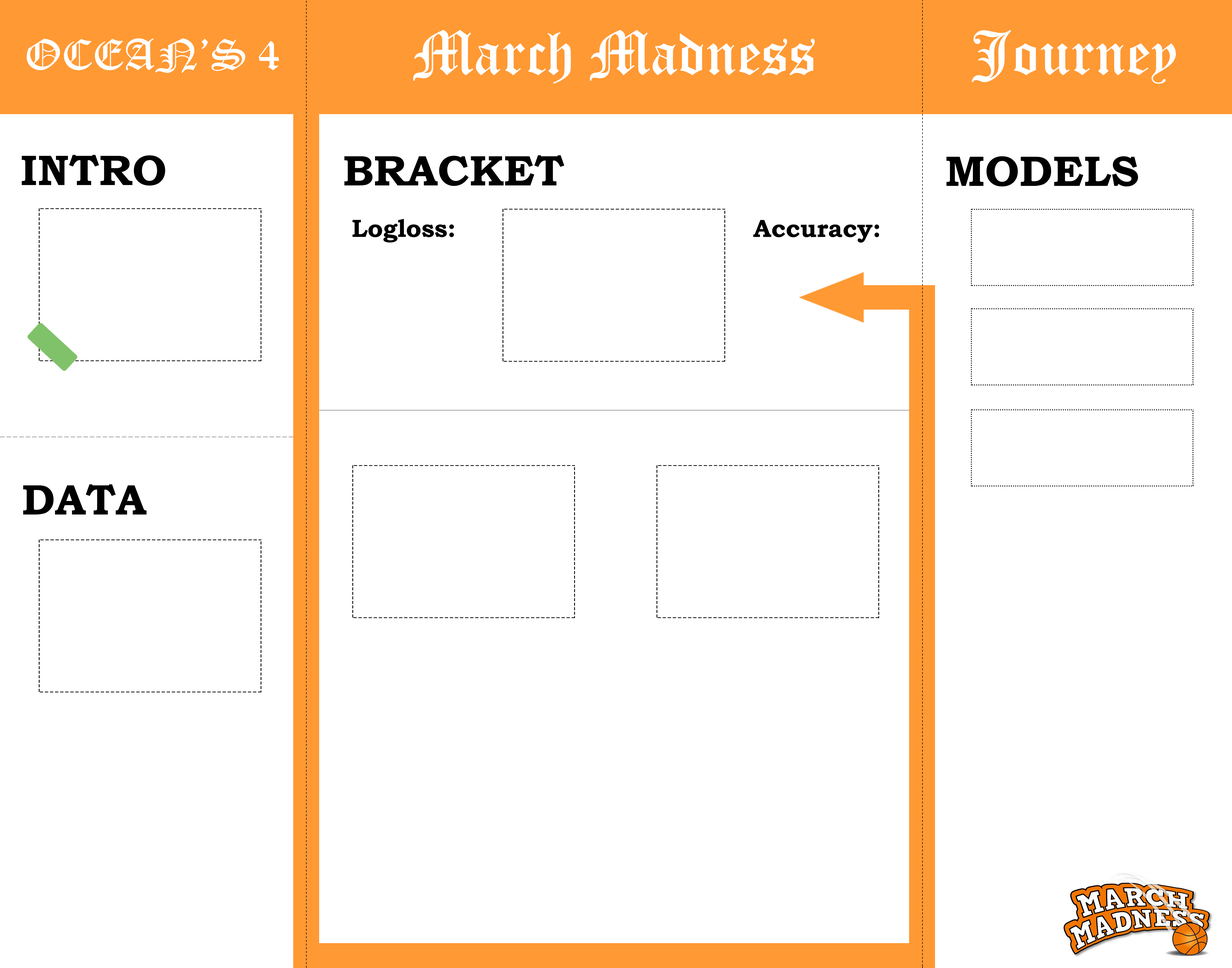
<style>
.page{position:relative;width:1232px;height:968px;background:#ffffff}
.page>*{position:absolute;margin:0}
.t1{font:61.1px "OldEnglishTextMT";color:#ffffff}
.t2{font:42.9px "OldEnglishTextMT";color:#ffffff}
.t3{font:42.8px "BookmanOldStyle-Bold";color:#000000}
.t4{font:24.9px "BookmanOldStyle-Bold";color:#000000}
</style>
<div class="page">
<p class="t1" style="left:413px;top:30px;width:402px;height:54px">March Madness</p>
<p class="t1" style="left:972px;top:30px;width:204px;height:54px">Journey</p>
<p class="t2" style="left:26px;top:38px;width:253px;height:35px">OCEAN’S 4</p>
<p class="t3" style="left:22px;top:155px;width:143px;height:31px">INTRO</p>
<p class="t3" style="left:344px;top:155px;width:220px;height:31px">BRACKET</p>
<p class="t3" style="left:946px;top:156px;width:192px;height:31px">MODELS</p>
<p class="t4" style="left:352px;top:219px;width:102px;height:24px">Logloss:</p>
<p class="t4" style="left:753px;top:220px;width:126px;height:23px">Accuracy:</p>
<p class="t3" style="left:23px;top:484px;width:124px;height:31px">DATA</p>
</div>
